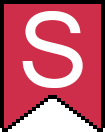
<style>
.page{position:relative;width:105px;height:132px;background:#cf2e4a}
.page>*{position:absolute;margin:0}
.t1{font:105px "ArialMT";color:#ffffff}
</style>
<div class="page">
<p class="t1" style="left:22px;top:11px;width:61px;height:77px">S</p>
</div>
